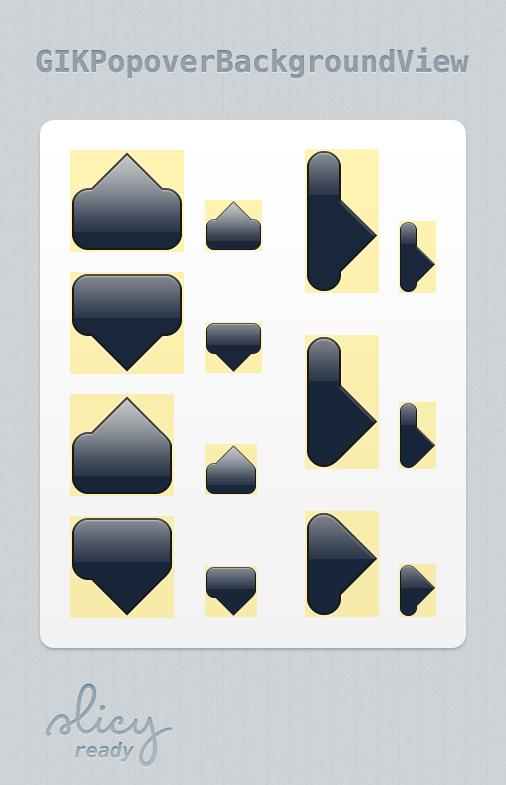
<style>
.page{position:relative;width:506px;height:785px}
.page>*{position:absolute;margin:0}
.t1{font:30px "Menlo-Bold";color:#919daa}
</style>
<div class="page">
<p class="t1" style="left:36px;top:47px;width:433px;height:32px">GIKPopoverBackgroundView</p>
</div>
